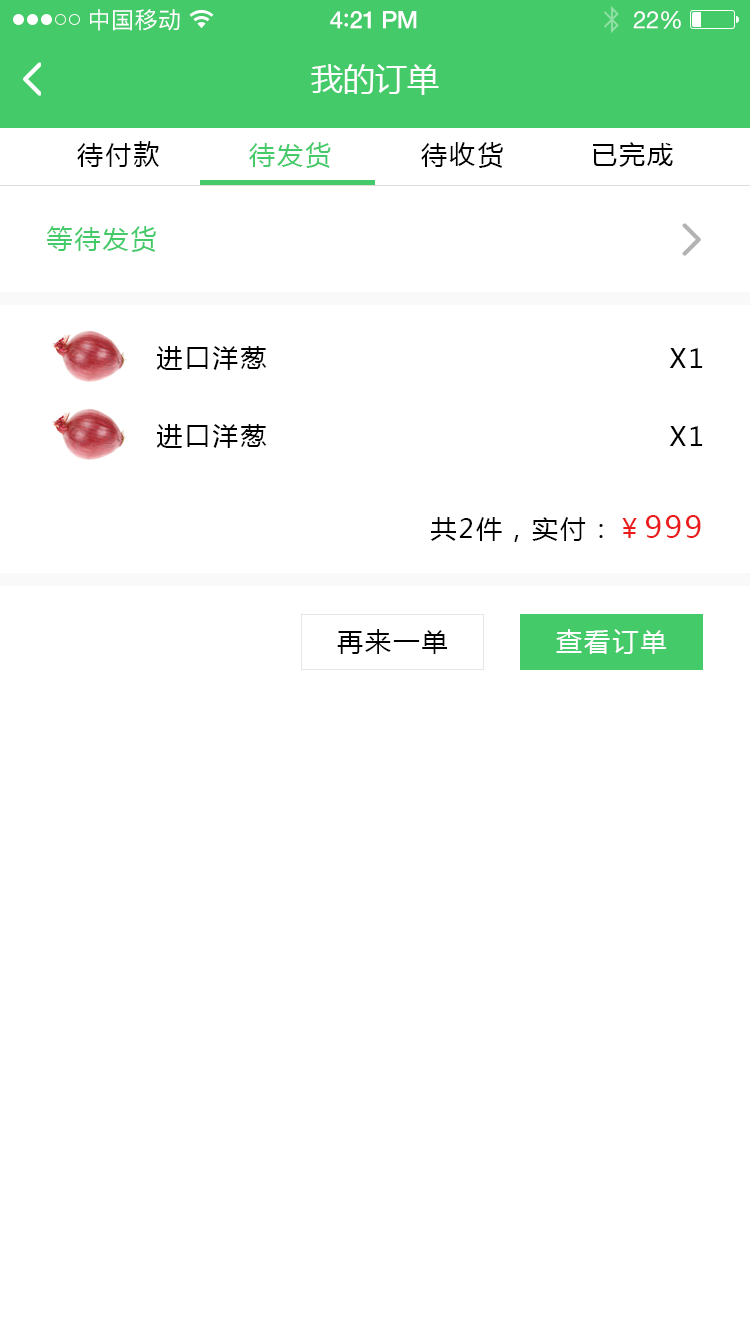
<style>
.page{position:relative;width:750px;height:1334px;background:#ffffff}
.page>*{position:absolute;margin:0}
.t1{font:23px "PingFangSC-Regular";letter-spacing:0.02em;color:#ffffff}
.t2{font:24px "HelveticaNeue-Medium";letter-spacing:-0.02em;color:#ffffff}
.t3{font:26px "Avenir-Medium";letter-spacing:-0.02em;color:#ffffff}
.t4{font:24px "HelveticaNeue";letter-spacing:-0.02em;color:#ffffff}
.t5{font:32px "MicrosoftYaHei";color:#ffffff;text-transform:uppercase}
.t6{font:26px "MicrosoftYaHei";letter-spacing:0.08em;color:#010101;text-transform:uppercase}
.t7{font:26px "MicrosoftYaHei";letter-spacing:0.08em;color:#44ca68;text-transform:uppercase}
.t8{font:26px "MicrosoftYaHei";letter-spacing:0.08em;color:#000000;text-transform:uppercase}
.t9{font:26px "MicrosoftYaHei";letter-spacing:0.08em;color:#eb1b1b;text-transform:uppercase}
.t10{font:30px "MicrosoftYaHei";letter-spacing:0.08em;color:#eb1b1b;text-transform:uppercase}
.t11{font:26px "MicrosoftYaHei";letter-spacing:0.08em;color:#ffffff;text-transform:uppercase}
</style>
<div class="page">
<p class="t1" style="left:90px;top:9px;width:90px;height:22px">中国移动</p>
<p class="t2" style="left:330px;top:11px;width:87px;height:18px">4<span class="t3">:</span>21 PM</p>
<p class="t4" style="left:633px;top:11px;width:48px;height:18px">22%</p>
<p class="t5" style="left:311px;top:64px;width:128px;height:31px">我的订单</p>
<p class="t6" style="left:77px;top:141px;width:82px;height:26px">待付款</p>
<p class="t7" style="left:249px;top:142px;width:82px;height:26px">待发货</p>
<p class="t8" style="left:421px;top:142px;width:82px;height:26px">待收货</p>
<p class="t8" style="left:593px;top:142px;width:80px;height:25px">已完成</p>
<p class="t7" style="left:46px;top:226px;width:110px;height:26px">等待发货</p>
<p class="t8" style="left:156px;top:346px;width:111px;height:24px">进口洋葱</p>
<p class="t8" style="left:669px;top:348px;width:34px;height:20px">x1</p>
<p class="t8" style="left:156px;top:424px;width:111px;height:24px">进口洋葱</p>
<p class="t8" style="left:669px;top:426px;width:34px;height:20px">x1</p>
<p class="t8" style="left:431px;top:515px;width:270px;height:27px">共2件，实付：<span class="t9">￥</span><span class="t10">999</span></p>
<p class="t8" style="left:337px;top:629px;width:110px;height:25px">再来一单</p>
<p class="t11" style="left:556px;top:629px;width:110px;height:25px">查看订单</p>
</div>
